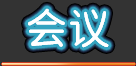
<style>
.page{position:relative;width:136px;height:66px;background:#333333}
.page>*{position:absolute;margin:0}
.t1{font:42.5px "Resource-Han-Rounded-CN-Regular";color:#ffffff}
</style>
<div class="page">
<p class="t1" style="left:28px;top:8px;width:81px;height:40px">会议</p>
<p class="t1" style="left:28px;top:8px;width:81px;height:40px">会议</p>
</div>
